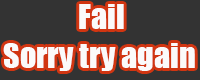
<style>
.page{position:relative;width:200px;height:80px;background:#333333}
.page>*{position:absolute;margin:0}
.t1{font:32px "Impact";color:#fbfafa}
.t2{font:32px "Impact";color:#1190d1}
</style>
<div class="page">
<p class="t1" style="left:3px;top:4px;width:192px;height:67px"><span class="t2">        </span>Fail<br>Sorry try again</p>
</div>
